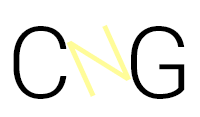
<style>
.page{position:relative;width:200px;height:117px;background:#ffffff}
.page>*{position:absolute;margin:0}
.t1{font:100px "Roboto-Light";color:#000000}
.t2{font:83.3px "Roboto-Light";color:#fffc99}
</style>
<div class="page">
<p class="t1" style="left:13px;top:26px;width:54px;height:73px">C</p>
<p class="t2" style="left:66px;top:24px;width:65px;height:73px;rotate:-24deg">N</p>
<p class="t1" style="left:131px;top:26px;width:54px;height:73px">G</p>
</div>
